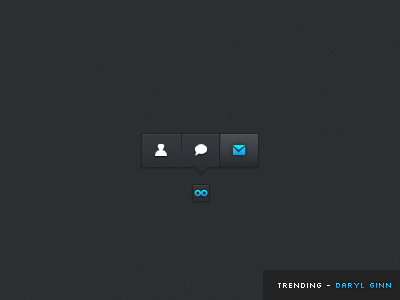
<style>
.page{position:relative;width:400px;height:300px;background:#2c2f32}
.page>*{position:absolute;margin:0}
.t1{font:8px "Silkscreen";color:#ffffff}
.t2{font:8px "Silkscreen"}
</style>
<div class="page">
<p class="t1" style="left:278px;top:283px;width:52px;height:5px">trending -</p>
<p class="t2" style="left:336px;top:283px;width:55px;height:5px">Daryl Ginn</p>
</div>
